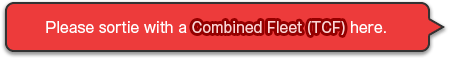
<style>
.page{position:relative;width:450px;height:58px;background:#ed3b3b}
.page>*{position:absolute;margin:0}
.t1{font:14px "GothicMB101Pro-Regular";color:#ffffff}
.t2{font:14px "GothicMB101Pro-Regular";color:#ffd3d3}
</style>
<div class="page">
<p class="t1" style="left:46px;top:21px;width:340px;height:14px">Please sortie with a <span class="t2">Combined Fleet (TCF)</span> here.</p>
<p class="t1" style="left:46px;top:21px;width:340px;height:14px">Please sortie with a <span class="t2">Combined Fleet (TCF)</span> here.</p>
</div>
